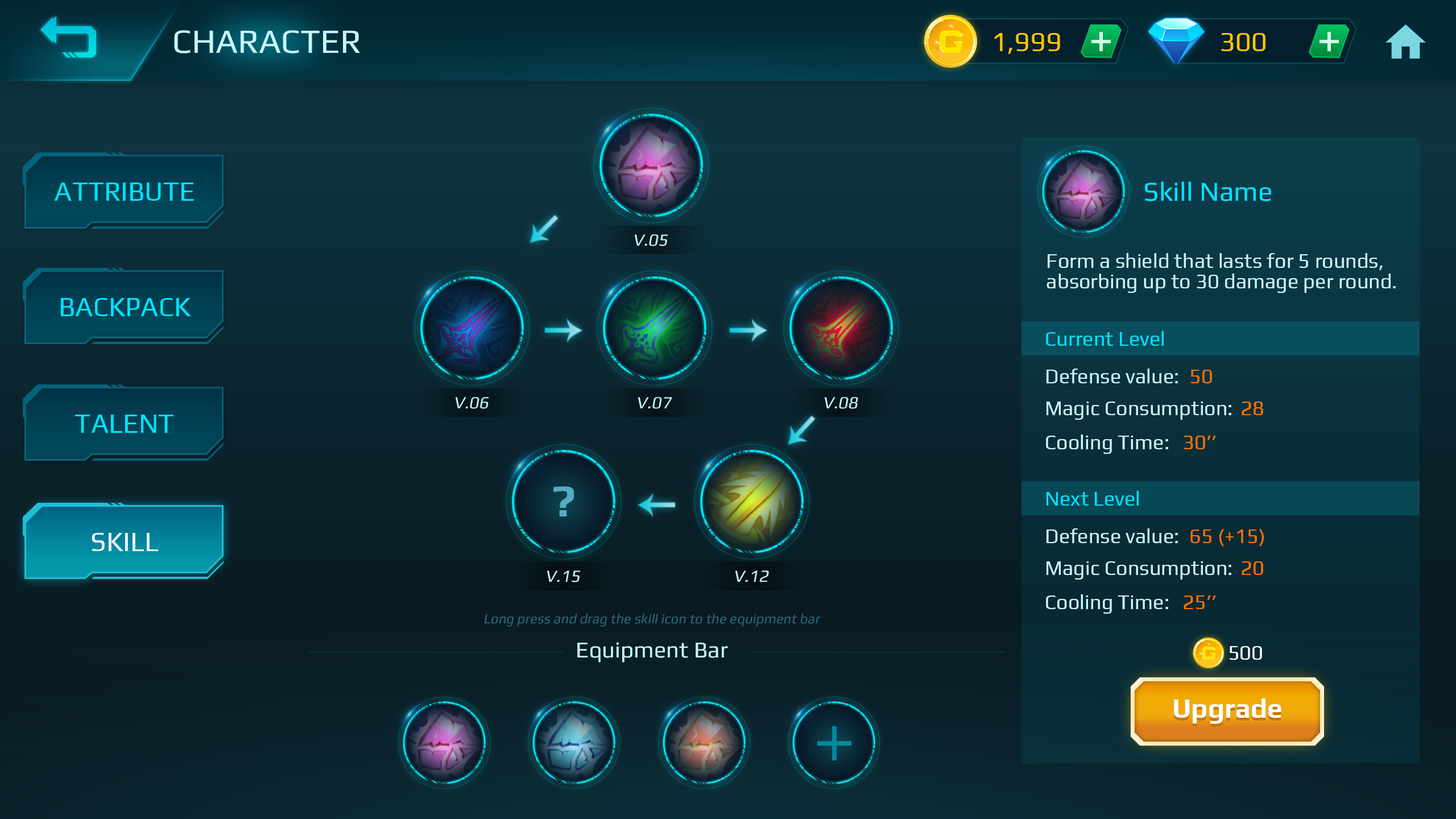
<style>
.page{position:relative;width:1456px;height:819px}
.page>*{position:absolute;margin:0}
.t1{font:34.1px "Play-Regular";color:#c6f6fc}
.t2{font:27.3px "Play-Regular";color:#ffc600}
.t3{font:27.3px "Play-Regular";color:#00e4ff}
.t4{font:17.1px "Play-Regular";color:#c6f2fc;font-style:italic}
.t5{font:20.5px/20.5px "Play-Regular";color:#cef7fd}
.t6{font:20.5px "Play-Regular";color:#00e4ff}
.t7{font:20.5px "Play-Regular";color:#cef8fd}
.t8{font:20.5px "Play-Regular";color:#ff7200}
.t9{font:45.5px "Play-Bold";color:#54acc2}
.t10{font:27.3px "Play-Regular";color:#effdff}
.t11{font:13.6px "Play-Regular";color:#2c6776;font-style:italic}
.t12{font:22.7px "Play-Regular";color:#c6f5fc}
.t13{font:20.5px "Play-Regular";color:#ffffff}
.t14{font:27.3px "Play-Bold";color:#ffffff}
</style>
<div class="page">
<p class="t1" style="left:174px;top:30px;width:186px;height:23px">CHARACTER</p>
<p class="t2" style="left:994px;top:33px;width:66px;height:21px">1,999</p>
<p class="t2" style="left:1221px;top:33px;width:44px;height:18px">300</p>
<p class="t3" style="left:54px;top:183px;width:140px;height:18px">ATTRIBUTE</p>
<p class="t3" style="left:1145px;top:181px;width:126px;height:20px">Skill Name</p>
<p class="t4" style="left:635px;top:234px;width:33px;height:12px">V.05</p>
<p class="t5" style="left:1046px;top:253px;width:350px;height:40px">Form a shield that lasts for 5 rounds, absorbing up to 30 damage per round.</p>
<p class="t3" style="left:61px;top:298px;width:130px;height:18px">BACKPACK</p>
<p class="t6" style="left:1046px;top:331px;width:118px;height:15px">Current Level</p>
<p class="t7" style="left:1046px;top:369px;width:132px;height:14px">Defense value:</p>
<p class="t8" style="left:1191px;top:370px;width:21px;height:13px">50</p>
<p class="t4" style="left:456px;top:397px;width:33px;height:12px">V.06</p>
<p class="t4" style="left:638px;top:397px;width:34px;height:12px">V.07</p>
<p class="t4" style="left:825px;top:397px;width:33px;height:12px">V.08</p>
<p class="t7" style="left:1046px;top:402px;width:185px;height:18px">Magic Consumption:</p>
<p class="t8" style="left:1242px;top:402px;width:21px;height:13px">28</p>
<p class="t3" style="left:75px;top:415px;width:98px;height:18px">TALENT</p>
<p class="t7" style="left:1046px;top:435px;width:122px;height:19px">Cooling Time:</p>
<p class="t8" style="left:1184px;top:436px;width:32px;height:13px">30’’</p>
<p class="t9" style="left:553px;top:486px;width:21px;height:30px">?</p>
<p class="t6" style="left:1046px;top:491px;width:93px;height:15px">Next Level</p>
<p class="t10" style="left:92px;top:533px;width:66px;height:18px">SKILL</p>
<p class="t7" style="left:1046px;top:528px;width:132px;height:15px">Defense value:</p>
<p class="t8" style="left:1190px;top:529px;width:74px;height:17px">65 (+15)</p>
<p class="t7" style="left:1046px;top:561px;width:185px;height:19px">Magic Consumption:</p>
<p class="t8" style="left:1242px;top:561px;width:21px;height:14px">20</p>
<p class="t4" style="left:547px;top:570px;width:34px;height:12px">V.15</p>
<p class="t4" style="left:735px;top:570px;width:34px;height:12px">V.12</p>
<p class="t7" style="left:1046px;top:594px;width:122px;height:20px">Cooling Time:</p>
<p class="t8" style="left:1184px;top:595px;width:32px;height:14px">25’’</p>
<p class="t11" style="left:484px;top:614px;width:337px;height:13px">Long press and drag the skill icon to the equipment bar</p>
<p class="t12" style="left:577px;top:642px;width:151px;height:21px">Equipment Bar</p>
<p class="t13" style="left:1230px;top:646px;width:32px;height:14px">500</p>
<p class="t14" style="left:1174px;top:698px;width:107px;height:26px">Upgrade</p>
</div>
